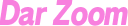
<style>
.page{position:relative;width:128px;height:26px;background:#ffffff}
.page>*{position:absolute;margin:0}
.t1{font:32px "RodinPro-EB";letter-spacing:-0.054em;color:#f880de;font-style:italic;scale:0.86 1}
</style>
<div class="page">
<p class="t1" style="left:0px;top:0px;width:128px;height:26px">Dar Zoom</p>
</div>
